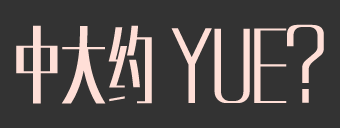
<style>
.page{position:relative;width:340px;height:128px;background:#333333}
.page>*{position:absolute;margin:0}
.t1{font:77.8px "MFXingHei_Noncommercial-Bold";color:#ffdfd7}
</style>
<div class="page">
<p class="t1" style="left:16px;top:24px;width:308px;height:80px">中大约 YUE?</p>
</div>
